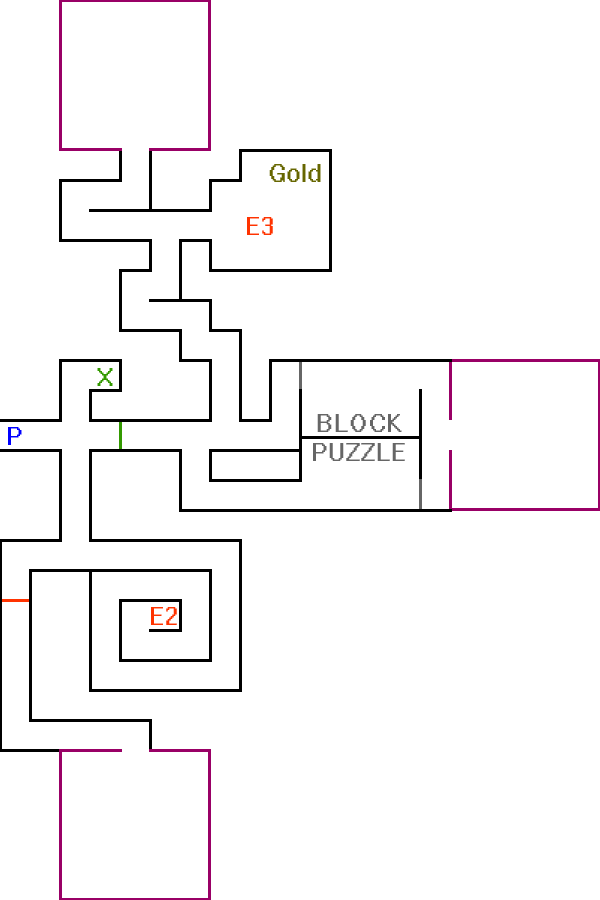
<style>
.page{position:relative;width:600px;height:900px;background:#ffffff}
.page>*{position:absolute;margin:0}
.t1{font:24px "System";color:#666600}
.t2{font:24px "System";color:#ff3300}
.t3{font:24px "System";color:#339900}
.t4{font:24px "System";color:#666666}
.t5{font:24px "System";color:#0000ff}
</style>
<div class="page">
<p class="t1" style="left:269px;top:164px;width:52px;height:18px">Gold</p>
<p class="t2" style="left:247px;top:217px;width:26px;height:18px">E3</p>
<p class="t3" style="left:97px;top:368px;width:16px;height:18px">X</p>
<p class="t4" style="left:313px;top:414px;width:92px;height:47px;text-align:center">BLOCK<br>PUZZLE</p>
<p class="t5" style="left:8px;top:427px;width:14px;height:18px">P</p>
<p class="t2" style="left:151px;top:607px;width:26px;height:18px">E2</p>
</div>
